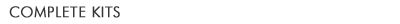
<style>
.page{position:relative;width:400px;height:24px;background:#ffffff}
.page>*{position:absolute;margin:0}
.t1{font:14.7px "FuturaBT-Light";letter-spacing:0.025em;color:#363636;text-transform:uppercase;font-weight:bold}
</style>
<div class="page">
<p class="t1" style="left:9px;top:6px;width:111px;height:12px">complete kits</p>
</div>
